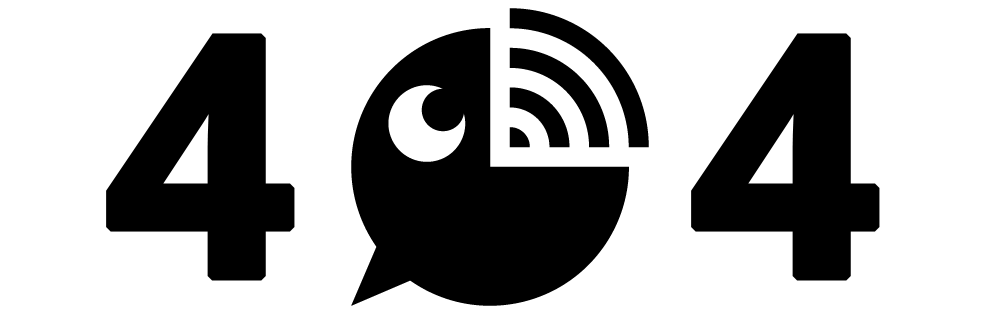
<style>
.page{position:relative;width:1000px;height:314px;background:#ffffff}
.page>*{position:absolute;margin:0}
.t1{font:333.3px "OpenSans-Bold";color:#000000;font-weight:bold}
</style>
<div class="page">
<p class="t1" style="left:106px;top:33px;width:189px;height:248px">4</p>
<p class="t1" style="left:691px;top:33px;width:189px;height:248px">4</p>
</div>
